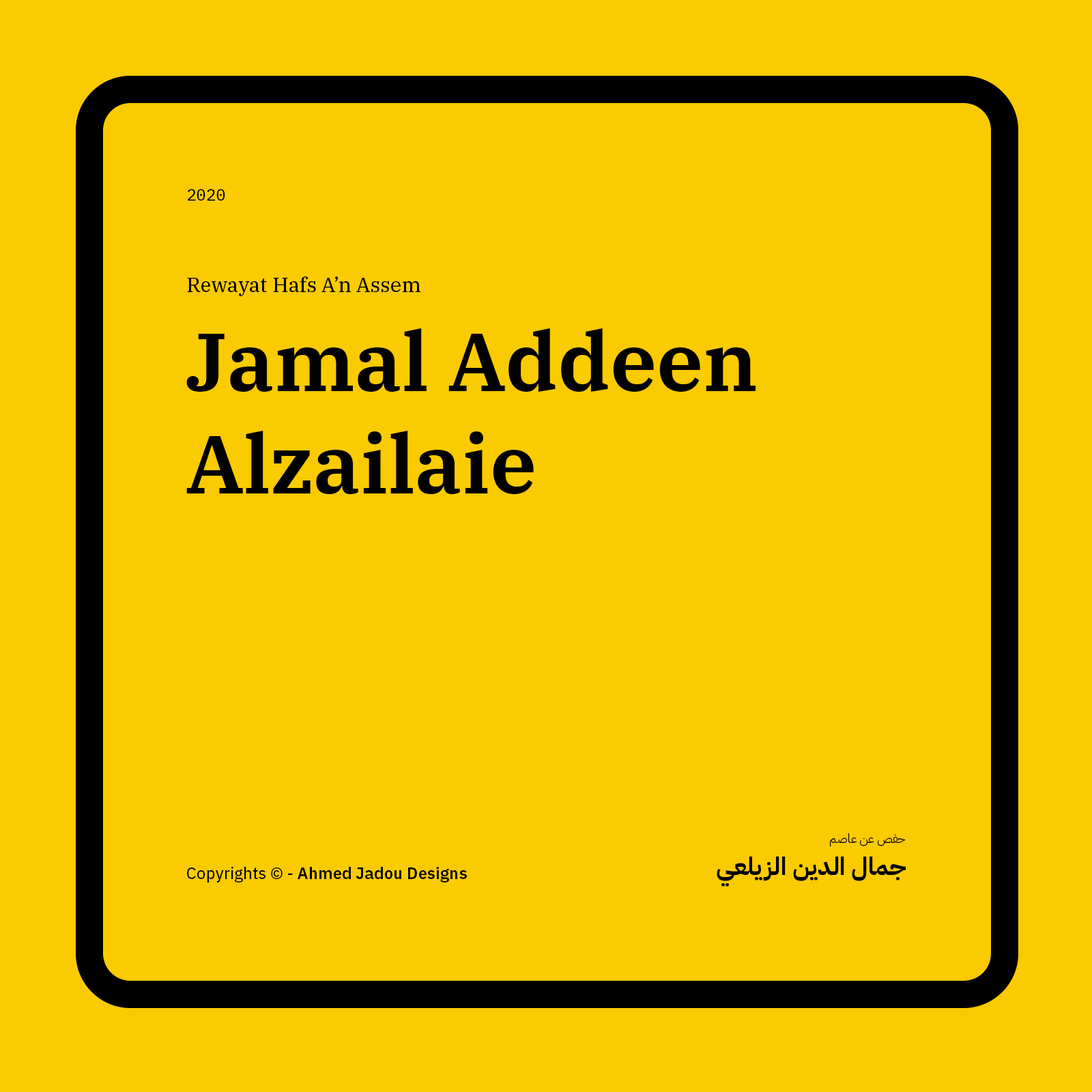
<style>
.page{position:relative;width:1092px;height:1092px;background:#facb00}
.page>*{position:absolute;margin:0}
.t1{font:16.4px "IBMPlexMono-Text";color:#000000}
.t2{font:20.5px "IBMPlexSerif-Text";color:#000000}
.t3{font:81.9px/102.7px "IBMPlexSerif-SemiBold";color:#000000}
.t4{font:12.3px "IBMPlexArabic-Light";color:#000000}
.t5{font:24.6px "IBMPlexArabic-Bold";color:#000000}
.t6{font:16.4px "IBMPlexSans-SemiBold";color:#000000}
.t7{font:16.4px "IBMPlexSans-Text";color:#000000}
</style>
<div class="page">
<p class="t1" style="left:188px;top:189px;width:37px;height:12px">2020</p>
<p class="t2" style="left:187px;top:276px;width:233px;height:20px">Rewayat Hafs A’n Assem</p>
<p class="t3" style="left:186px;top:328px;width:570px;height:166px">Jamal Addeen Alzailaie</p>
<p class="t4" style="left:830px;top:833px;width:76px;height:14px">حفص عن عاصم</p>
<p class="t5" style="left:717px;top:857px;width:189px;height:30px">جمال الدين الزيلعي</p>
<p class="t6" style="left:187px;top:867px;width:280px;height:15px"><span class="t7">Copyrights © - </span>Ahmed Jadou Designs</p>
</div>
